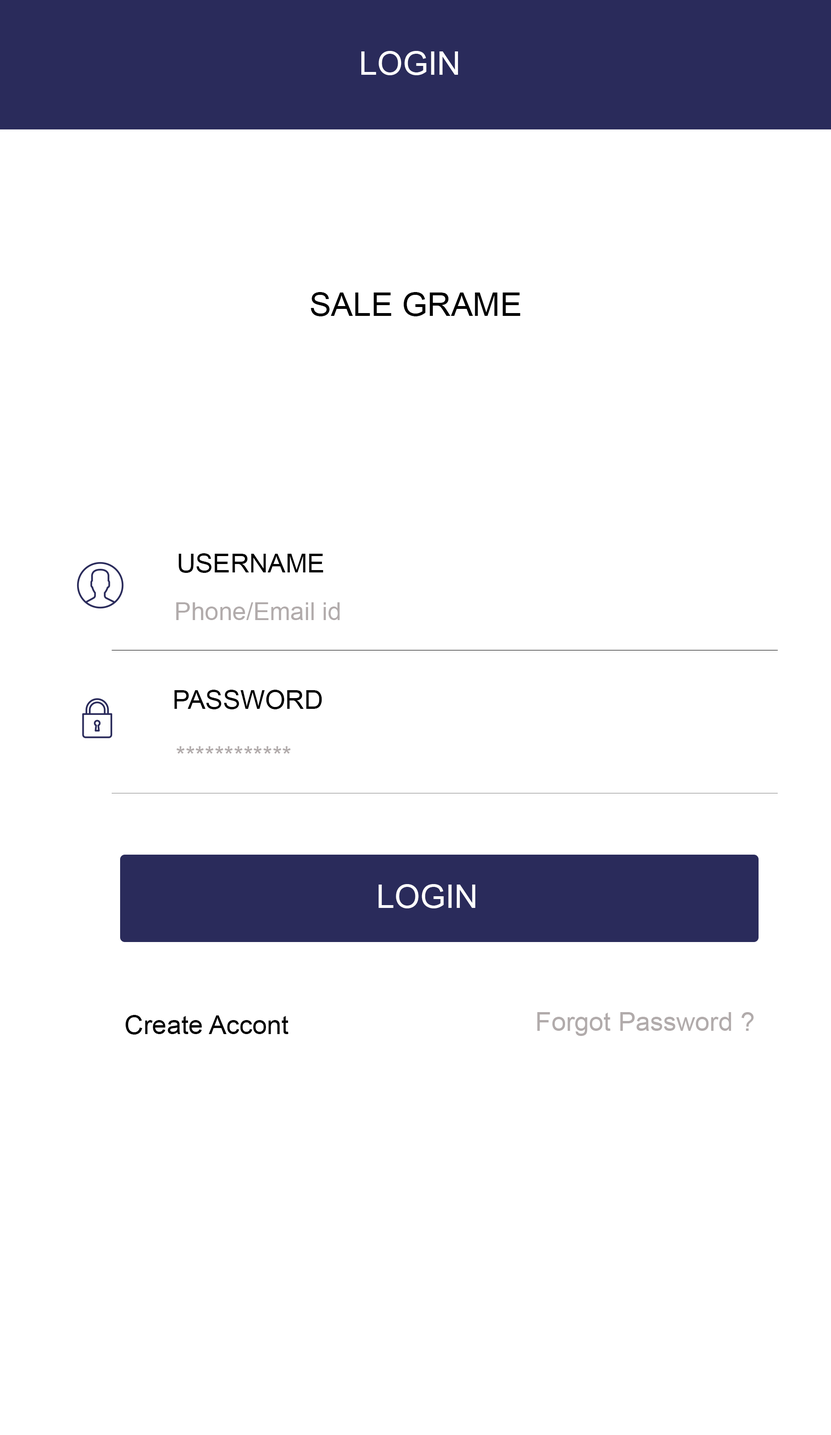
<style>
.page{position:relative;width:831px;height:1435px;background:#ffffff}
.page>*{position:absolute;margin:0}
.t1{font:32.5px "ArialMT";color:#ffffff}
.t2{font:32.5px "ArialMT";color:#000000}
.t3{font:26px "ArialMT";color:#000000}
.t4{font:24.7px "ArialMT";color:#b1abab}
.t5{font:26px "ArialMT";color:#b1abab}
</style>
<div class="page">
<p class="t1" style="left:361px;top:51px;width:97px;height:24px">LOGIN</p>
<p class="t2" style="left:311px;top:292px;width:209px;height:24px">SALE GRAME</p>
<p class="t3" style="left:179px;top:553px;width:144px;height:20px">USERNAME</p>
<p class="t4" style="left:176px;top:602px;width:164px;height:18px">Phone/Email id</p>
<p class="t3" style="left:174px;top:690px;width:148px;height:19px">PASSWORD</p>
<p class="t4" style="left:176px;top:746px;width:115px;height:8px">************</p>
<p class="t1" style="left:379px;top:884px;width:96px;height:24px">LOGIN</p>
<p class="t5" style="left:537px;top:1012px;width:217px;height:24px">Forgot Password ?</p>
<p class="t3" style="left:125px;top:1015px;width:163px;height:20px">Create Accont</p>
</div>
